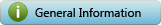
<style>
.page{position:relative;width:161px;height:25px}
.page>*{position:absolute;margin:0}
.t1{font:12px "SegoeUI";color:#010101}
</style>
<div class="page">
<p class="t1" style="left:35px;top:8px;width:106px;height:9px">General Information</p>
</div>
